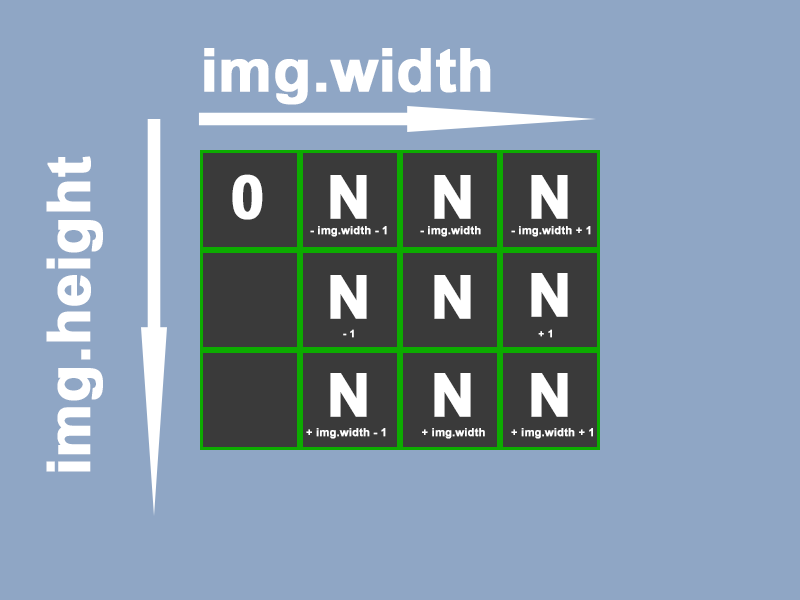
<style>
.page{position:relative;width:800px;height:600px;background:#8fa6c5}
.page>*{position:absolute;margin:0}
.t1{font:60px "Arial-BoldMT";color:#ffffff;font-weight:bold}
.t2{font:59.9px "Arial-BoldMT";color:#ffffff;font-weight:bold}
.t3{font:11px "Arial-BoldMT";color:#ffffff;font-weight:bold}
.t4{font:10px "Arial-BoldMT";color:#ffffff;font-weight:bold}
</style>
<div class="page">
<p class="t1" style="left:204px;top:48px;width:287px;height:57px">img.width</p>
<p class="t2" style="left:46px;top:156px;width:57px;height:316px;rotate:-90deg">img.height</p>
<p class="t1" style="left:232px;top:174px;width:31px;height:46px">0</p>
<p class="t1" style="left:330px;top:175px;width:37px;height:44px">N</p>
<p class="t1" style="left:434px;top:175px;width:37px;height:44px">N</p>
<p class="t1" style="left:531px;top:175px;width:37px;height:44px">N</p>
<p class="t3" style="left:310px;top:226px;width:77px;height:11px">- img.width - 1</p>
<p class="t3" style="left:420px;top:226px;width:61px;height:11px">- img.width</p>
<p class="t3" style="left:511px;top:226px;width:80px;height:11px">- img.width + 1</p>
<p class="t1" style="left:330px;top:275px;width:37px;height:44px">N</p>
<p class="t1" style="left:434px;top:275px;width:37px;height:44px">N</p>
<p class="t1" style="left:531px;top:273px;width:37px;height:44px">N</p>
<p class="t4" style="left:343px;top:329px;width:11px;height:9px">- 1</p>
<p class="t4" style="left:538px;top:329px;width:14px;height:9px">+ 1</p>
<p class="t1" style="left:330px;top:373px;width:37px;height:44px">N</p>
<p class="t1" style="left:434px;top:373px;width:37px;height:44px">N</p>
<p class="t1" style="left:531px;top:373px;width:37px;height:44px">N</p>
<p class="t3" style="left:306px;top:428px;width:80px;height:11px">+ img.width - 1</p>
<p class="t3" style="left:422px;top:428px;width:63px;height:11px">+ img.width</p>
<p class="t3" style="left:511px;top:428px;width:82px;height:11px">+ img.width + 1</p>
</div>
